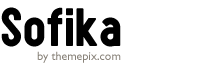
<style>
.page{position:relative;width:214px;height:63px;background:#ffffff}
.page>*{position:absolute;margin:0}
.t1{font:56px "Sugo";color:#000000}
.t2{font:12px "GillSans";color:#888279}
</style>
<div class="page">
<p class="t1" style="left:1px;top:7px;width:120px;height:40px">Sofika</p>
<p class="t2" style="left:37px;top:51px;width:84px;height:12px">by themepix.com</p>
</div>
